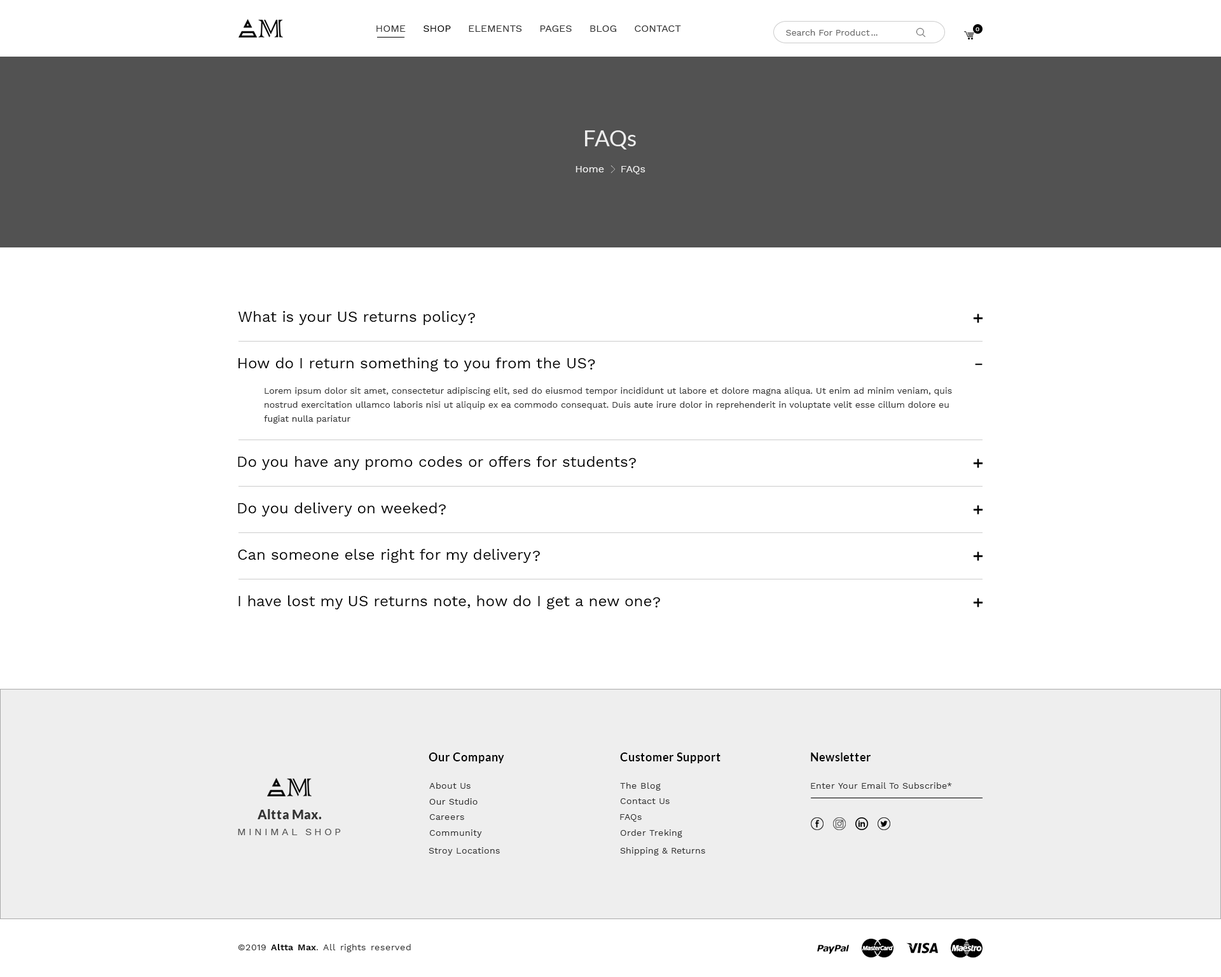
<style>
.page{position:relative;width:1221px;height:977px;background:#ffffff}
.page>*{position:absolute;margin:0}
.t1{font:10.2px "WorkSans-Regular";color:#333333}
.t2{font:10.2px "WorkSans-Regular";color:#000000}
.t3{font:8.9px "WorkSans-Regular";color:#666666}
.t4{font:6.4px "WorkSans-Regular";color:#ffffff}
.t5{font:22.3px "Lato-Regular";color:#eeeeee}
.t6{font:10.2px "WorkSans-Regular";color:#eeeeee}
.t7{font:15.3px "WorkSans-Regular";color:#000000}
.t8{font:8.9px/14px "WorkSans-Regular";color:#333333}
.t9{font:11.4px "Lato-Bold";letter-spacing:0.03em;color:#000000}
.t10{font:8.9px "WorkSans-Regular";letter-spacing:0.03em;color:#333333}
.t11{font:12.7px "Lato-Black";letter-spacing:0.03em;color:#333333}
.t12{font:10.2px "WorkSans-Regular";letter-spacing:0.25em;color:#555555}
.t13{font:8.9px "WorkSans-SemiBold";letter-spacing:0.03em;color:#000000}
</style>
<div class="page">
<p class="t1" style="left:376px;top:25px;width:305px;height:7px">HOME     <span class="t2">SHOP</span>     ELEMENTS     PAGES     BLOG     CONTACT</p>
<p class="t3" style="left:786px;top:29px;width:84px;height:7px">Search For Product</p>
<p class="t4" style="left:975px;top:27px;width:4px;height:4px">0</p>
<p class="t3" style="left:871px;top:34px;width:7px;height:2px">...</p>
<p class="t5" style="left:585px;top:130px;width:51px;height:19px">FAQs</p>
<p class="t6" style="left:575px;top:166px;width:29px;height:6px">Home</p>
<p class="t6" style="left:621px;top:166px;width:24px;height:8px">FAQs</p>
<p class="t7" style="left:238px;top:311px;width:228px;height:14px">What is your US returns policy</p>
<p class="t7" style="left:467px;top:313px;width:8px;height:10px">?</p>
<p class="t7" style="left:238px;top:357px;width:348px;height:14px">How do I return something to you from the US</p>
<p class="t7" style="left:588px;top:359px;width:7px;height:10px">?</p>
<p class="t8" style="left:264px;top:387px;width:688px;height:36px;text-align:right">Lorem ipsum dolor sit amet, consectetur adipiscing elit, sed do eiusmod tempor incididunt ut labore et dolore magna aliqua. Ut enim ad minim veniam, quis nostrud exercitation ullamco laboris nisi ut aliquip ex ea commodo consequat. Duis aute irure dolor in reprehenderit in voluptate velit esse cillum dolore eu fugiat nulla pariatur</p>
<p class="t7" style="left:238px;top:456px;width:390px;height:14px">Do you have any promo codes or offers for students</p>
<p class="t7" style="left:628px;top:458px;width:8px;height:10px">?</p>
<p class="t7" style="left:238px;top:502px;width:199px;height:14px">Do you delivery on weeked</p>
<p class="t7" style="left:438px;top:504px;width:8px;height:10px">?</p>
<p class="t7" style="left:238px;top:549px;width:293px;height:14px">Can someone else right for my delivery</p>
<p class="t7" style="left:532px;top:551px;width:8px;height:10px">?</p>
<p class="t7" style="left:238px;top:595px;width:414px;height:14px">I have lost my US returns note, how do I get a new one</p>
<p class="t7" style="left:652px;top:597px;width:8px;height:10px">?</p>
<p class="t9" style="left:429px;top:752px;width:75px;height:11px">Our Company</p>
<p class="t9" style="left:620px;top:752px;width:100px;height:11px">Customer Support</p>
<p class="t9" style="left:811px;top:752px;width:60px;height:9px">Newsletter</p>
<p class="t10" style="left:429px;top:782px;width:42px;height:6px">About Us</p>
<p class="t10" style="left:620px;top:782px;width:41px;height:8px">The Blog</p>
<p class="t10" style="left:811px;top:782px;width:141px;height:6px">Enter Your Email To Subscribe*</p>
<p class="t11" style="left:258px;top:809px;width:64px;height:10px">Altta Max.</p>
<p class="t10" style="left:429px;top:798px;width:49px;height:6px">Our Studio</p>
<p class="t10" style="left:620px;top:798px;width:50px;height:6px">Contact Us</p>
<p class="t10" style="left:429px;top:814px;width:35px;height:6px">Careers</p>
<p class="t10" style="left:620px;top:814px;width:22px;height:8px">FAQs</p>
<p class="t12" style="left:238px;top:829px;width:103px;height:6px">MINIMAL SHOP</p>
<p class="t10" style="left:429px;top:829px;width:53px;height:8px">Community</p>
<p class="t10" style="left:620px;top:829px;width:62px;height:8px">Order Treking</p>
<p class="t10" style="left:429px;top:847px;width:71px;height:8px">Stroy Locations</p>
<p class="t10" style="left:620px;top:847px;width:85px;height:8px">Shipping &amp; Returns</p>
<p class="t10" style="left:238px;top:944px;width:173px;height:8px">©2019 <span class="t13">Altta Max</span>. All rights reserved</p>
</div>
